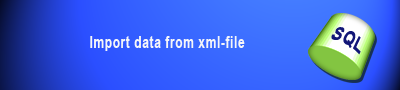
<style>
.page{position:relative;width:400px;height:90px}
.page>*{position:absolute;margin:0}
.t1{font:19.6px "Arial-BoldMT";letter-spacing:0.05em;color:#121777;scale:0.77 1}
.t2{font:15.6px "Arial-BoldMT";letter-spacing:0.05em;color:#f5f6f9;scale:0.77 1}
</style>
<div class="page">
<p class="t1" style="left:331px;top:27px;width:30px;height:28px;rotate:28deg">SQL</p>
<p class="t2" style="left:90px;top:36px;width:155px;height:15px">Import data from xml-file</p>
</div>
